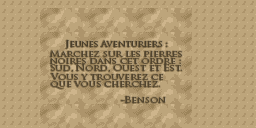
<style>
.page{position:relative;width:256px;height:128px;background:#bda57b}
.page>*{position:absolute;margin:0}
.t1{font:8.5px "TrajanPro-Regular";color:#4a3f2b;scale:1.06 1}
.t2{font:8.5px/7.1px "TrajanPro-Regular";color:#52452f;scale:1.15 1}
.t3{font:8.5px "TrajanPro-Regular";color:#52452f;scale:1.15 1}
</style>
<div class="page">
<p class="t1" style="left:65px;top:40px;width:103px;height:9px">Jeunes Aventuriers :</p>
<p class="t2" style="left:50px;top:50px;width:132px;height:22px">Marchez sur les pierres<br>noires dans cet ordre :<br>Sud, Nord, Ouest et Est.</p>
<p class="t2" style="left:50px;top:73px;width:114px;height:16px">Vous y trouverez ce<br>que vous cherchez.</p>
<p class="t3" style="left:121px;top:96px;width:45px;height:7px">-Benson</p>
</div>
